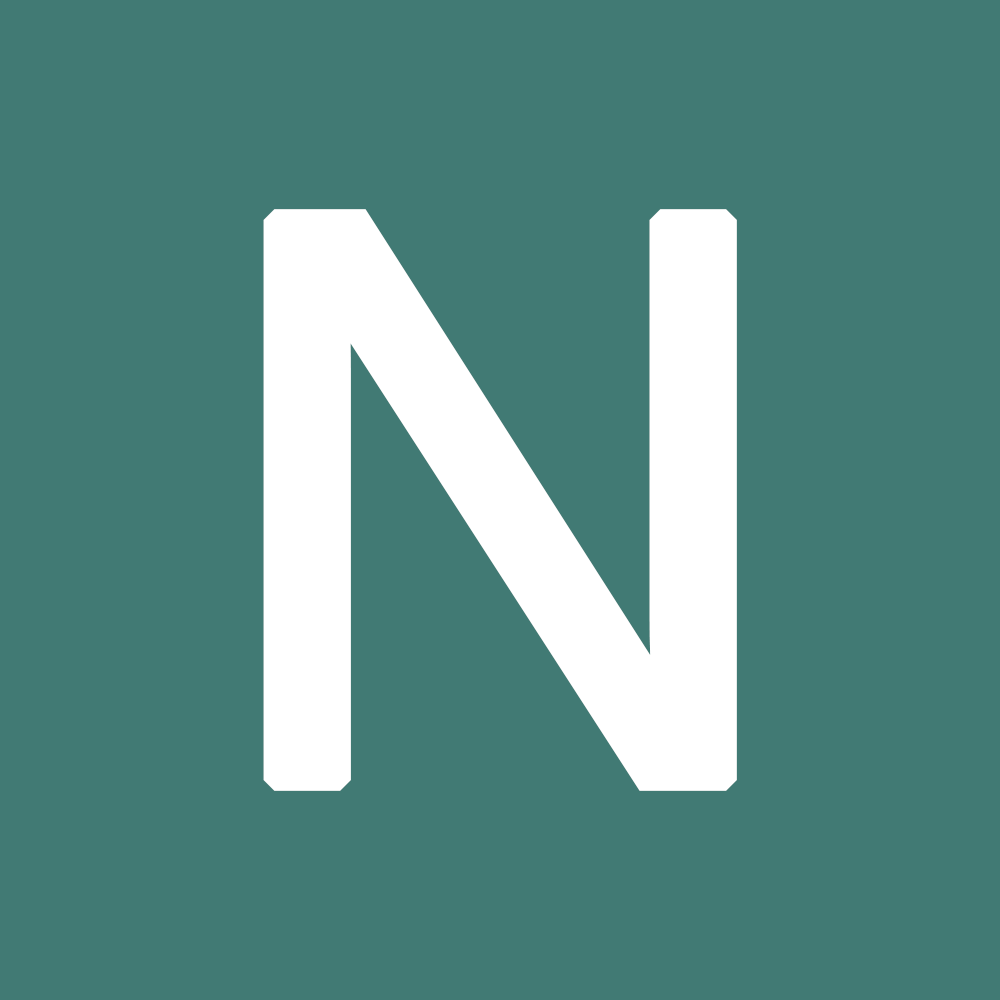
<style>
.page{position:relative;width:1000px;height:1000px;background:#417a74}
.page>*{position:absolute;margin:0}
.t1{font:800px "SegoeUI";color:#ffffff;font-weight:bold}
</style>
<div class="page">
<p class="t1" style="left:263px;top:209px;width:474px;height:582px">N</p>
</div>
